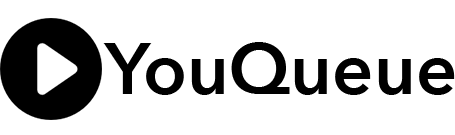
<style>
.page{position:relative;width:455px;height:135px;background:#ffffff}
.page>*{position:absolute;margin:0}
.t1{font:72px "AvenirNext-DemiBold";color:#000000}
</style>
<div class="page">
<p class="t1" style="left:103px;top:42px;width:352px;height:53px">YouQueue</p>
</div>
